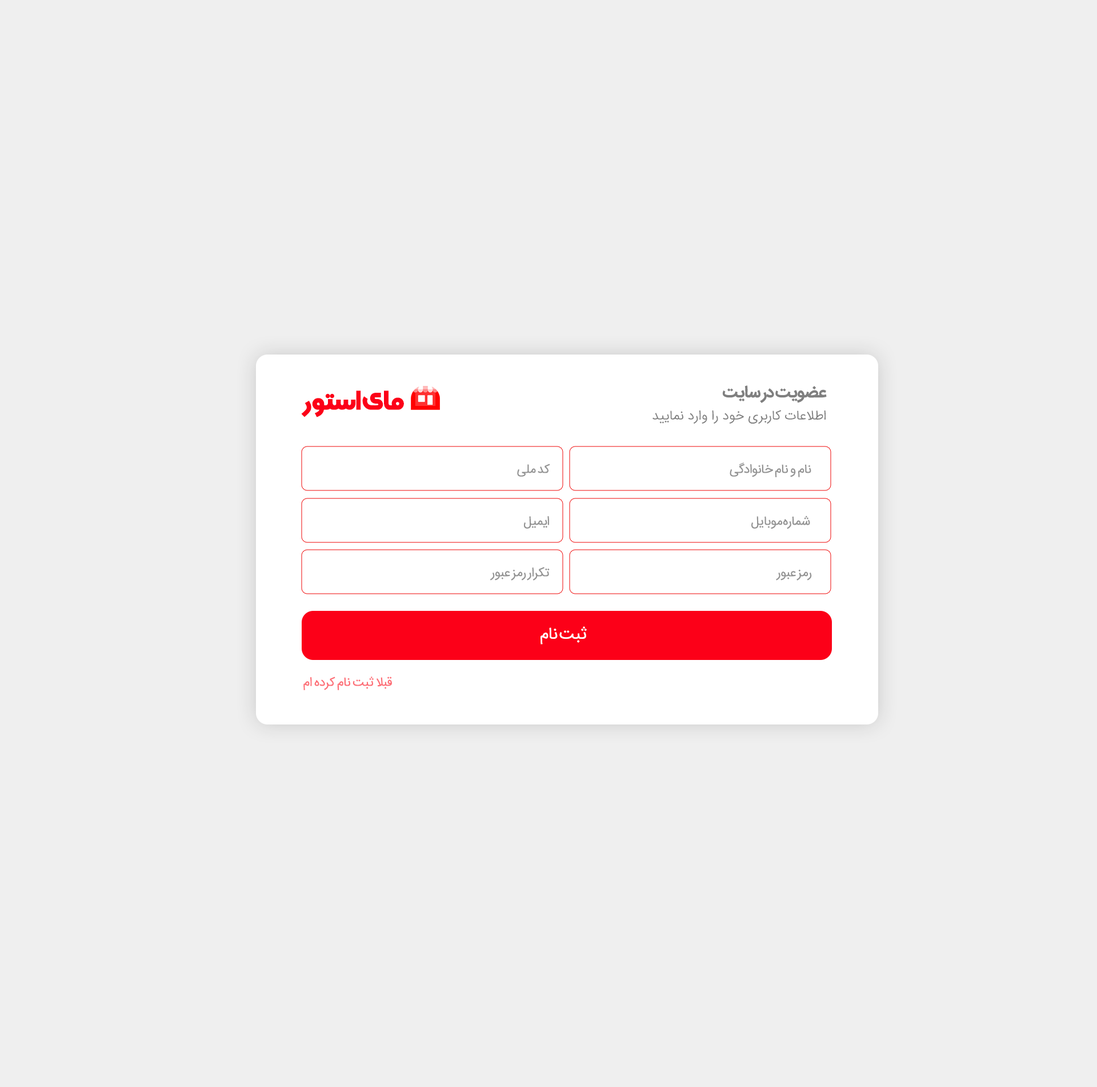
<style>
.page{position:relative;width:1097px;height:1087px;background:#efefef}
.page>*{position:absolute;margin:0}
.t1{font:16.7px "IRANSansFaNum-Bold";letter-spacing:-0.04em;color:#7f7f7f}
.t2{font:27.1px "SultanAdan";letter-spacing:-0.04em;color:#fc0018}
.t3{font:13.5px "IRANSansFaNum-Light";color:#7f7f7f}
.t4{font:12.7px "IRANSansFaNum";letter-spacing:-0.04em;color:#939393}
.t5{font:16.7px "IRANSansFaNum";letter-spacing:-0.04em;color:#ffffff}
.t6{font:12.7px "IRANSansFaNum";letter-spacing:-0.04em;color:#fd6e76}
</style>
<div class="page">
<p class="t1" style="left:722px;top:386px;width:104px;height:17px">عضویت در سایت</p>
<p class="t2" style="left:301px;top:391px;width:103px;height:26px">مای استور</p>
<p class="t3" style="left:652px;top:410px;width:173px;height:14px">اطلاعات کاربری خود را وارد نمایید</p>
<p class="t4" style="left:517px;top:464px;width:33px;height:13px">کد ملی</p>
<p class="t4" style="left:729px;top:463px;width:82px;height:14px">نام و نام خانوادگی</p>
<p class="t4" style="left:524px;top:516px;width:25px;height:13px">ایمیل</p>
<p class="t4" style="left:751px;top:516px;width:59px;height:13px">شماره موبایل</p>
<p class="t4" style="left:490px;top:567px;width:59px;height:14px">تکرار رمز عبور</p>
<p class="t4" style="left:776px;top:569px;width:36px;height:12px">رمز عبور</p>
<p class="t5" style="left:540px;top:627px;width:47px;height:18px">ثبت نام</p>
<p class="t6" style="left:303px;top:677px;width:89px;height:13px">قبلا ثبت نام کرده ام</p>
</div>
